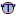
<style>
.page{position:relative;width:16px;height:16px;background:#ffffff}
.page>*{position:absolute;margin:0}
.t1{font:12px "ScalaSansPro-Regular";color:#1a0b59}
</style>
<div class="page">
<p class="t1" style="left:0px;top:4px;width:16px;height:8px">“T”</p>
</div>
